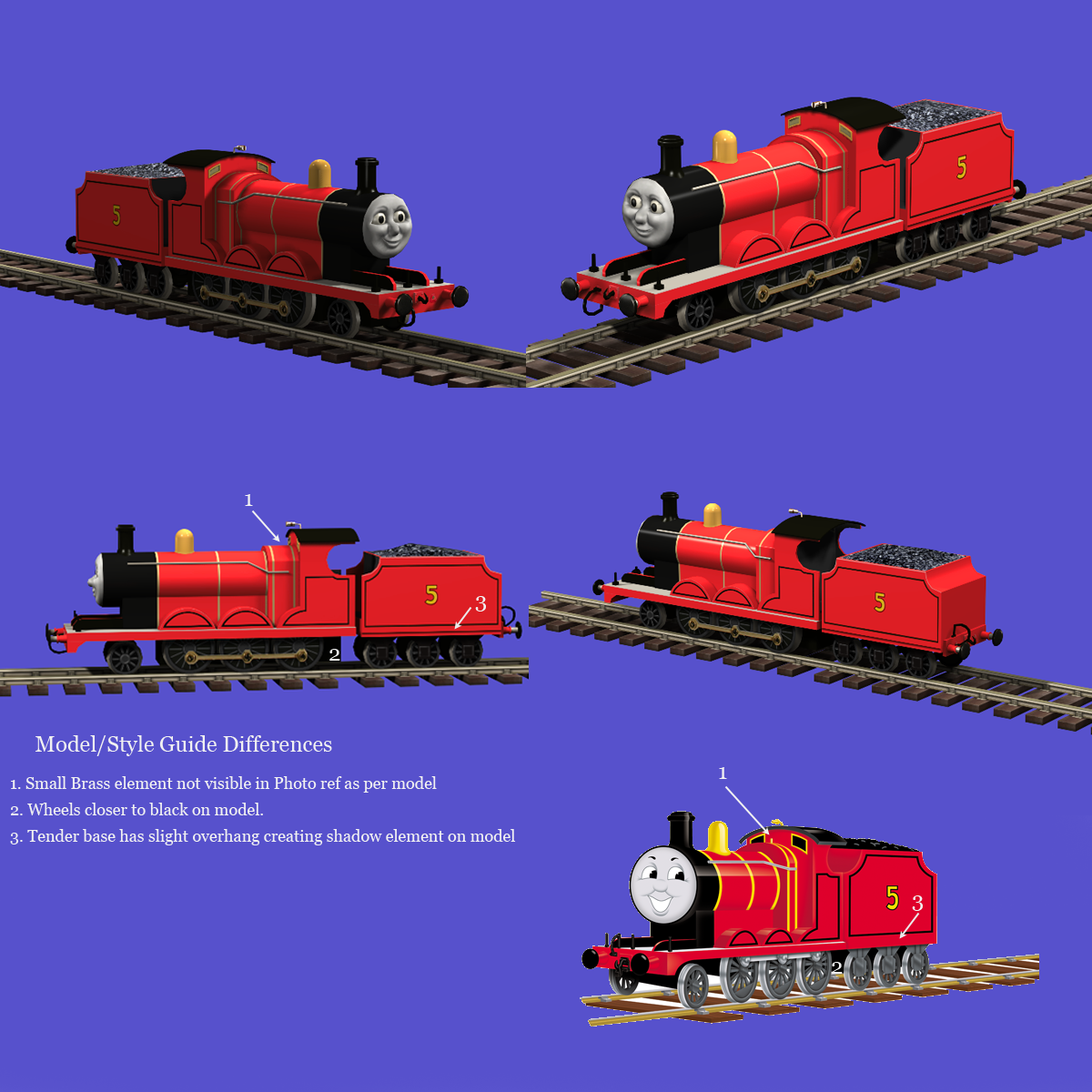
<style>
.page{position:relative;width:1092px;height:1092px;background:#5751cc}
.page>*{position:absolute;margin:0}
.t1{font:21.8px "Georgia";color:#f1f1f1}
.t2{font:16.4px "Georgia";color:#f1f1f1}
</style>
<div class="page">
<p class="t1" style="left:245px;top:494px;width:8px;height:12px">1</p>
<p class="t1" style="left:475px;top:596px;width:11px;height:16px">3</p>
<p class="t1" style="left:329px;top:649px;width:11px;height:12px">2</p>
<p class="t1" style="left:35px;top:735px;width:297px;height:21px">Model/Style Guide Differences</p>
<p class="t1" style="left:719px;top:767px;width:8px;height:12px">1</p>
<p class="t2" style="left:11px;top:776px;width:426px;height:17px">1. Small Brass element not visible in Photo ref as per model</p>
<p class="t2" style="left:10px;top:803px;width:253px;height:12px">2. Wheels closer to black on model.</p>
<p class="t2" style="left:10px;top:829px;width:506px;height:16px">3. Tender base has slight overhang creating shadow element on model</p>
<p class="t1" style="left:912px;top:895px;width:11px;height:16px">3</p>
<p class="t1" style="left:832px;top:962px;width:11px;height:12px">2</p>
</div>
